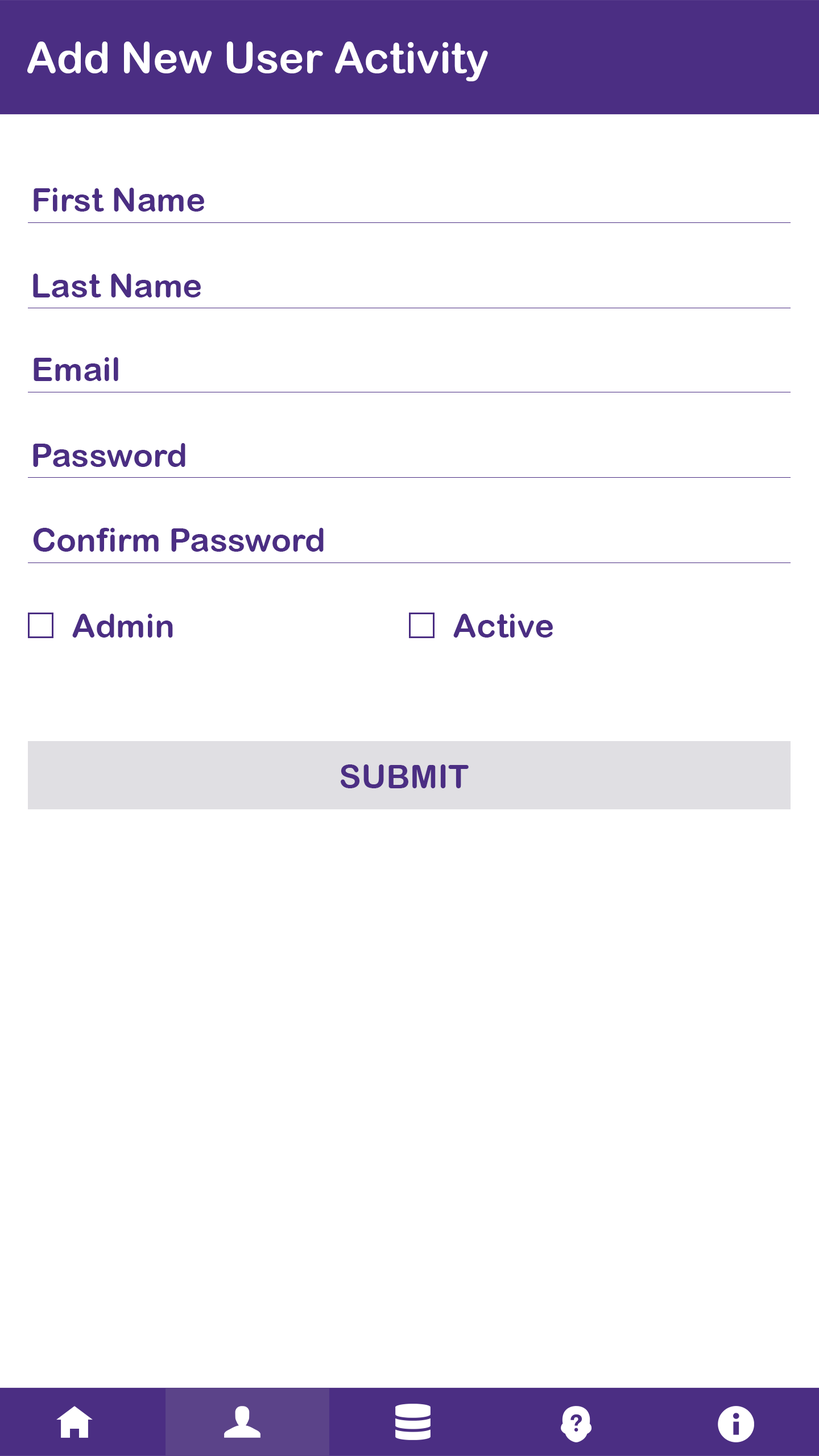
<style>
.page{position:relative;width:819px;height:1456px;background:#ffffff}
.page>*{position:absolute;margin:0}
.t1{font:42.7px "ArialRoundedMTBold";color:#ffffff}
.t2{font:33.2px "ArialRoundedMTBold";color:#4b2e83}
</style>
<div class="page">
<p class="t1" style="left:27px;top:42px;width:461px;height:39px">Add New User Activity</p>
<p class="t2" style="left:34px;top:188px;width:170px;height:24px">First Name</p>
<p class="t2" style="left:33px;top:274px;width:168px;height:23px">Last Name</p>
<p class="t2" style="left:34px;top:357px;width:84px;height:24px">Email</p>
<p class="t2" style="left:33px;top:443px;width:152px;height:24px">Password</p>
<p class="t2" style="left:33px;top:528px;width:291px;height:24px">Confirm Password</p>
<p class="t2" style="left:72px;top:614px;width:101px;height:24px">Admin</p>
<p class="t2" style="left:453px;top:614px;width:100px;height:24px">Active</p>
<p class="t2" style="left:341px;top:764px;width:128px;height:24px">SUBMIT</p>
</div>
